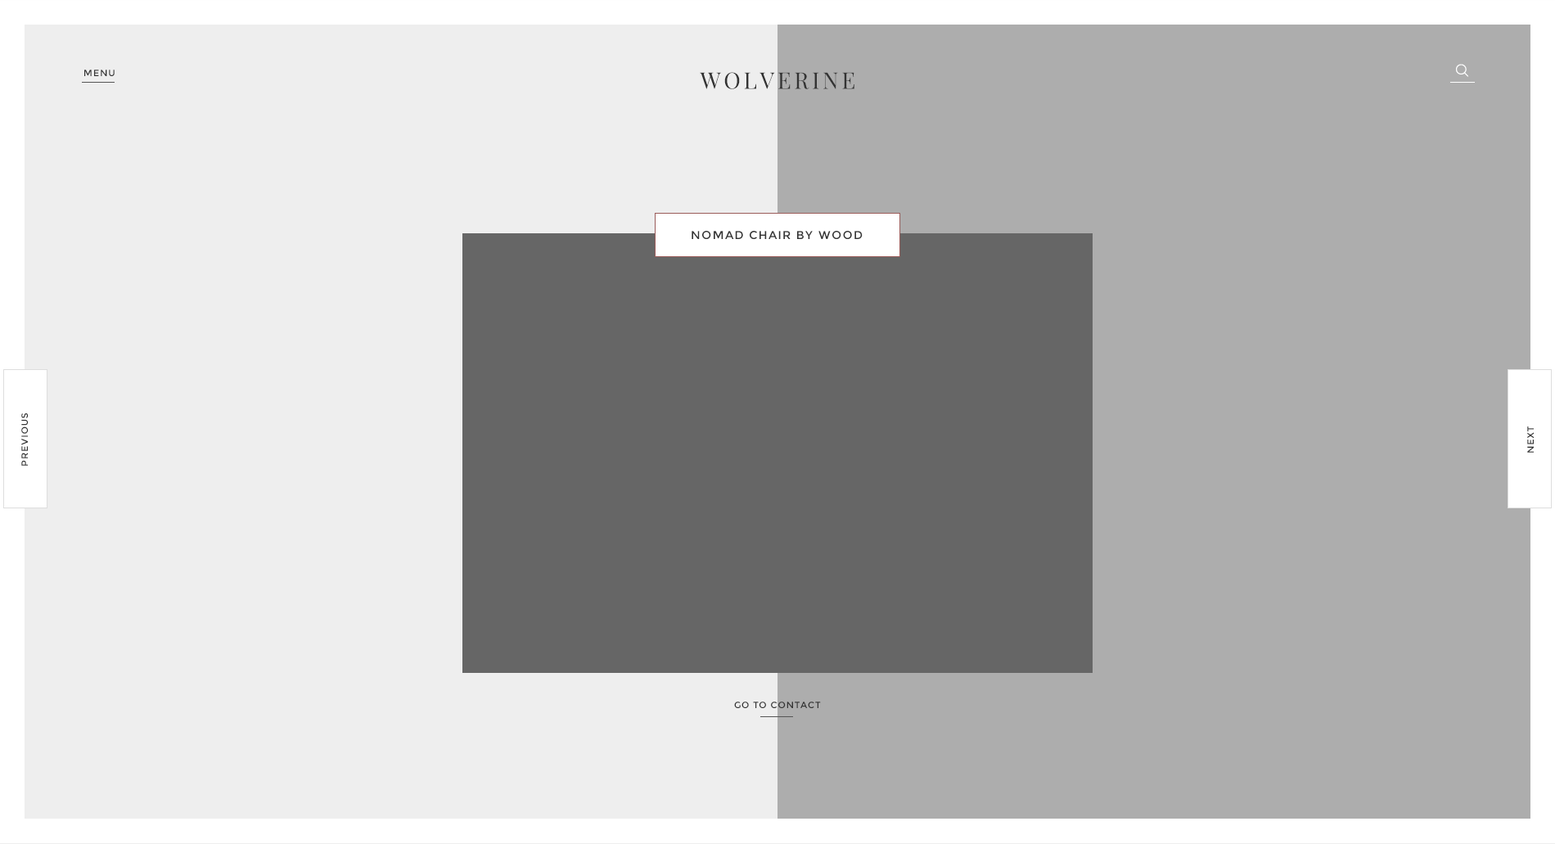
<style>
.page{position:relative;width:1555px;height:844px;background:#adadad}
.page>*{position:absolute;margin:0}
.t1{font:9px "Montserrat-Regular";letter-spacing:0.1em;color:#333333}
.t2{font:22.7px "PlayfairDisplay-Regular";letter-spacing:0.1em;color:#333333}
.t3{font:11.5px "Montserrat-Regular";letter-spacing:0.1em;color:#333333}
</style>
<div class="page">
<p class="t1" style="left:84px;top:70px;width:31px;height:6px">MENU</p>
<p class="t2" style="left:700px;top:72px;width:154px;height:17px">WOLVERINE</p>
<p class="t3" style="left:691px;top:231px;width:171px;height:8px">NOMAD CHAIR BY WOOD</p>
<p class="t1" style="left:21px;top:412px;width:7px;height:54px;rotate:-90deg">PREVIOUS</p>
<p class="t1" style="left:1527px;top:426px;width:6px;height:26px;rotate:-90deg">NEXT</p>
<p class="t1" style="left:734px;top:701px;width:87px;height:7px">GO TO CONTACT</p>
</div>
